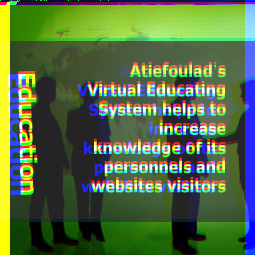
<style>
.page{position:relative;width:255px;height:255px}
.page>*{position:absolute;margin:0}
.t1{font:16px "BEsfehanBold"}
.t2{font:23px "BEsfehanBold";letter-spacing:0.04em;scale:1.16 1}
</style>
<div class="page">
<p class="t1" style="left:87px;top:59px;width:139px;height:129px">Atiefoulad’s Virtual Educating System helps to increase knowledge of its personnels and websites visitors</p>
<p class="t2" style="left:18px;top:69px;width:20px;height:121px;rotate:89deg">Education</p>
</div>
